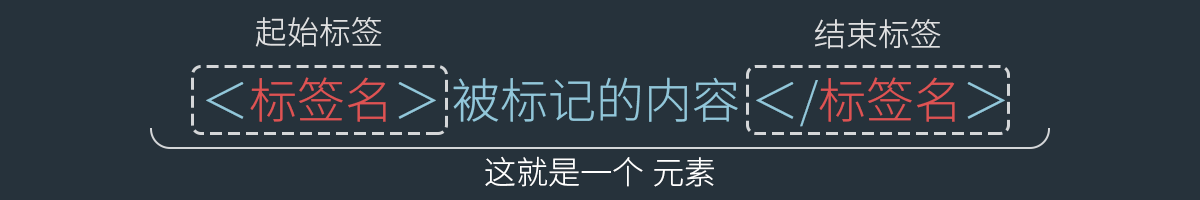
<style>
.page{position:relative;width:1200px;height:200px;background:#26323b}
.page>*{position:absolute;margin:0}
.t1{font:32px "SourceHanSansCN-Light";color:#dfe0e1}
.t2{font:48px "SourceHanSansCN-Light";color:#92c7da}
.t3{font:48px "SourceHanSansCN-Light";color:#de5353}
.t4{font:32px "SourceHanSansCN-Light";color:#ffffff}
</style>
<div class="page">
<p class="t1" style="left:255px;top:17px;width:127px;height:30px">起始标签</p>
<p class="t1" style="left:815px;top:19px;width:126px;height:30px">结束标签</p>
<p class="t2" style="left:206px;top:77px;width:799px;height:50px">&lt;<span class="t3">标签名</span>&gt; 被标记的内容 &lt;/<span class="t3">标签名</span>&gt;</p>
<p class="t4" style="left:485px;top:156px;width:229px;height:31px">这就是一个 元素</p>
</div>
